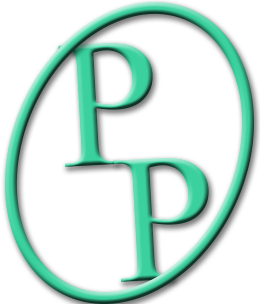
<style>
.page{position:relative;width:260px;height:304px;background:#ffffff}
.page>*{position:absolute;margin:0}
.t1{font:183.4px "TimesNewRomanPSMT"}
</style>
<div class="page">
<p class="t1" style="left:58px;top:42px;width:95px;height:125px;rotate:-3deg">P</p>
<p class="t1" style="left:114px;top:157px;width:95px;height:125px;rotate:-3deg">P</p>
</div>
